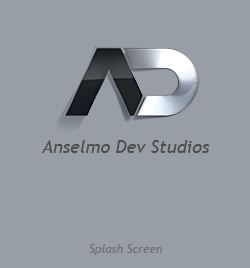
<style>
.page{position:relative;width:250px;height:268px;background:#989ea6}
.page>*{position:absolute;margin:0}
.t1{font:18px "TrebuchetMS-Italic";color:#4d4d4d}
.t2{font:12px "TrebuchetMS-Italic";color:#6e7174}
</style>
<div class="page">
<p class="t1" style="left:41px;top:140px;width:169px;height:13px">Anselmo Dev Studios</p>
<p class="t2" style="left:89px;top:244px;width:73px;height:11px">Splash Screen</p>
</div>
